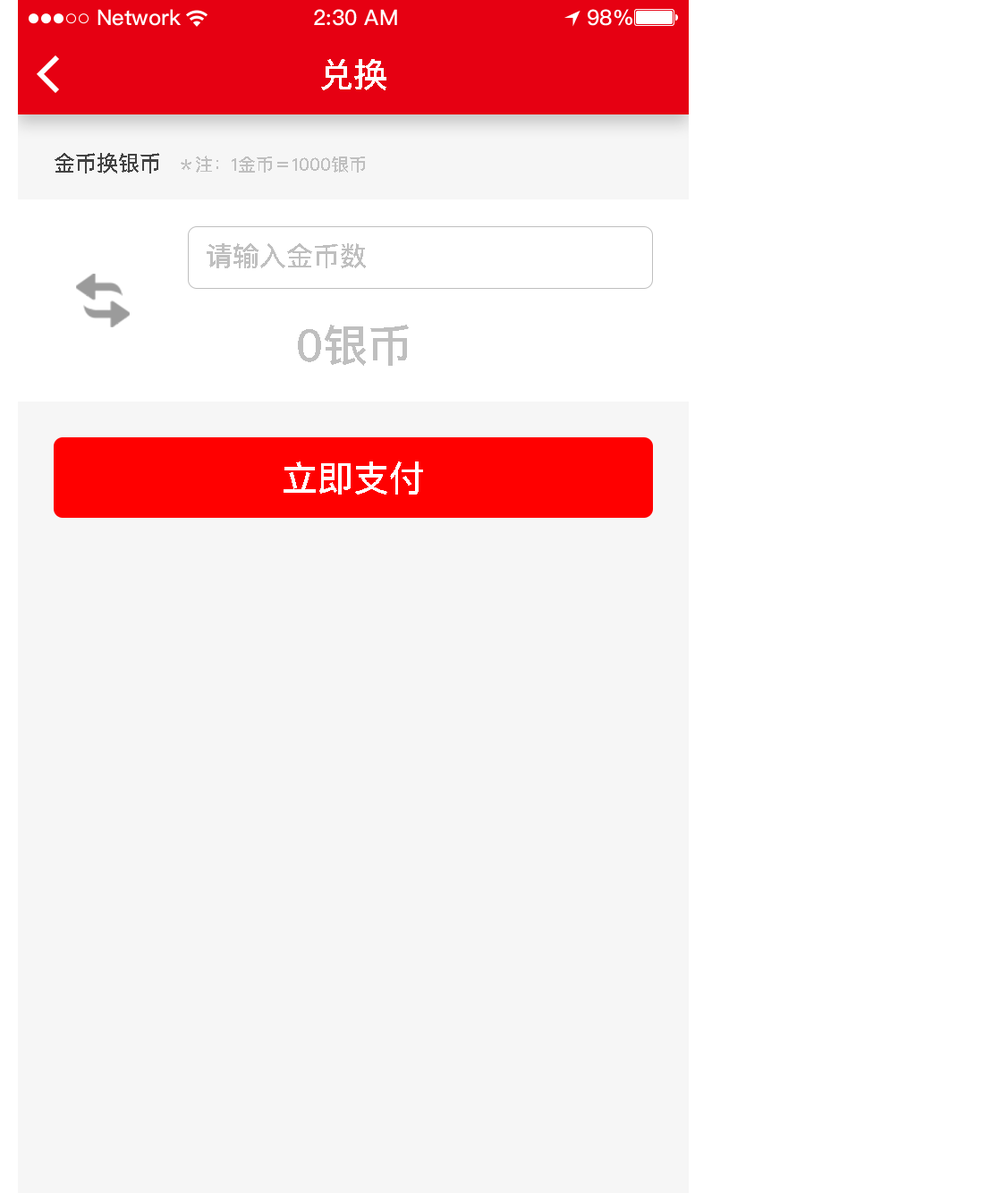
<style>
.page{position:relative;width:1000px;height:1193px;background:#f6f6f6}
.page>*{position:absolute;margin:0}
.t1{font:34px "PingFangSC-Medium";color:#ffffff;text-transform:uppercase}
.t2{font:21.5px "PingFangSC-Medium";color:#434343;text-transform:uppercase}
.t3{font:17.9px "PingFangSC-Medium";color:#bfbfbf;text-transform:uppercase}
.t4{font:26.8px "PingFangSC-Medium";color:#bfbfbf;text-transform:uppercase}
.t5{font:44.7px "PingFangSC-Medium";color:#bfbfbf;text-transform:uppercase}
.t6{font:35.8px "PingFangSC-Medium";color:#ffffff;text-transform:uppercase}
</style>
<div class="page">
<p class="t1" style="left:321px;top:59px;width:65px;height:31px">兑换</p>
<p class="t2" style="left:55px;top:153px;width:104px;height:20px">金币换银币</p>
<p class="t3" style="left:181px;top:156px;width:184px;height:17px">＊注：1金币＝1000银币</p>
<p class="t4" style="left:207px;top:243px;width:159px;height:25px">请输入金币数</p>
<p class="t5" style="left:298px;top:325px;width:111px;height:41px">0银币</p>
<p class="t6" style="left:283px;top:461px;width:140px;height:33px">立即支付</p>
</div>
